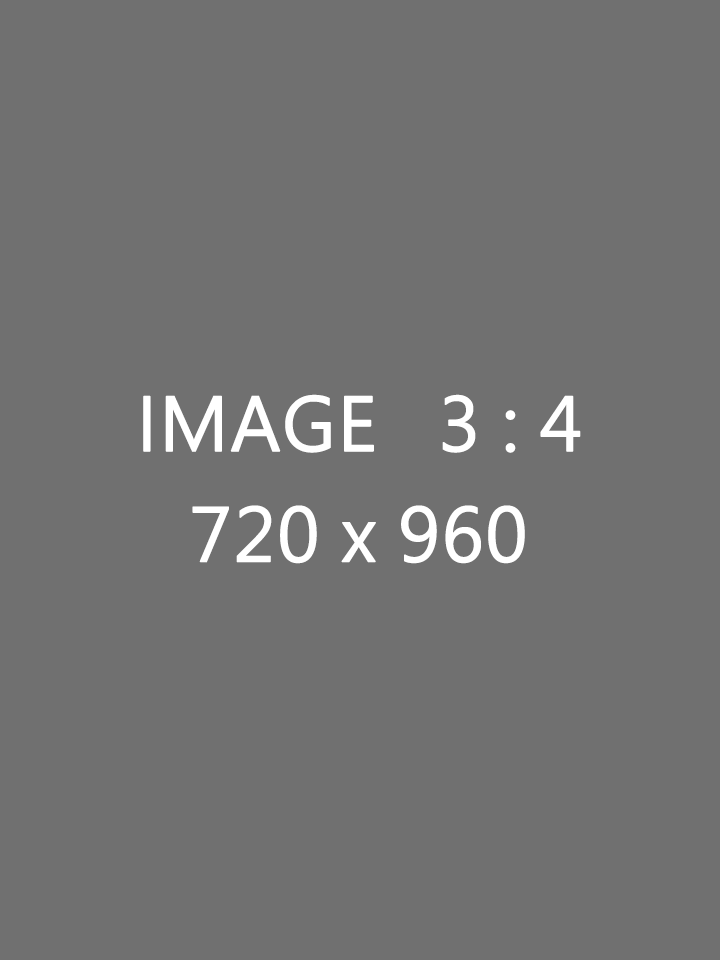
<style>
.page{position:relative;width:720px;height:960px;background:#707070}
.page>*{position:absolute;margin:0}
.t1{font:72px "MicrosoftJhengHeiRegular";color:#ffffff;font-weight:bold}
</style>
<div class="page">
<p class="t1" style="left:143px;top:394px;width:438px;height:59px">IMAGE   3 : 4</p>
<p class="t1" style="left:192px;top:505px;width:333px;height:59px">720 x 960</p>
</div>
